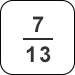
<style>
.page{position:relative;width:75px;height:75px;background:#ffffff}
.page>*{position:absolute;margin:0}
.t1{font:22px/30px "Arial-BoldMT";letter-spacing:0.08em;color:#333333}
</style>
<div class="page">
<p class="t1" style="left:26px;top:16px;width:25px;height:47px;text-align:center">7<br>13</p>
</div>
